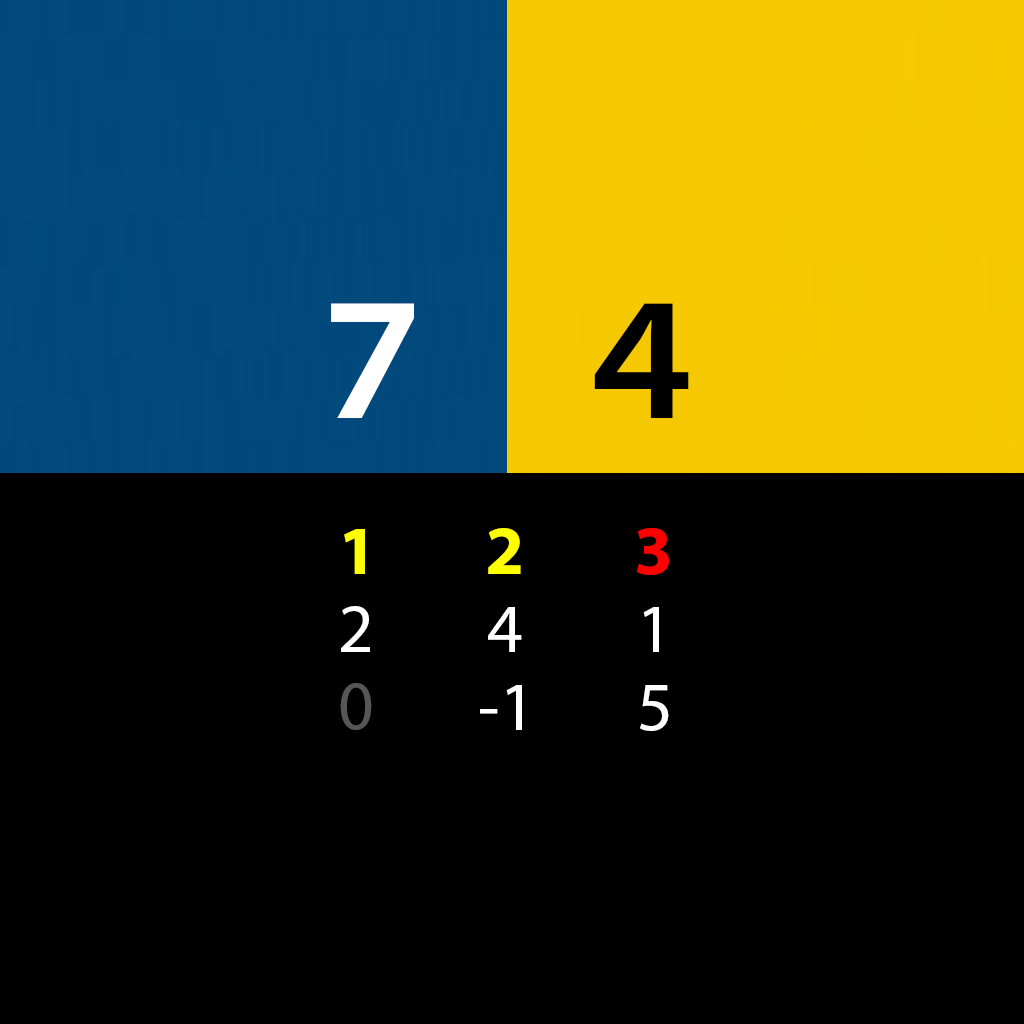
<style>
.page{position:relative;width:1024px;height:1024px;background:#000000}
.page>*{position:absolute;margin:0}
.t1{font:176px "MyriadConceptRoman-SemiboldSemiExtended";color:#ffffff}
.t2{font:176px "MyriadConceptRoman-SemiboldSemiExtended";color:#000000}
.t3{font:70px "MyriadPro-Bold";color:#ffff00}
.t4{font:70px "MyriadPro-Bold";color:#ff0000}
.t5{font:70px "MyriadPro-Regular";color:#ffffff}
.t6{font:70px "MyriadPro-Regular";color:#565656}
</style>
<div class="page">
<p class="t1" style="left:331px;top:303px;width:83px;height:115px">7</p>
<p class="t2" style="left:594px;top:303px;width:95px;height:115px">4</p>
<p class="t3" style="left:344px;top:529px;width:21px;height:45px">1</p>
<p class="t3" style="left:488px;top:528px;width:33px;height:46px">2</p>
<p class="t4" style="left:637px;top:528px;width:32px;height:47px">3</p>
<p class="t5" style="left:341px;top:606px;width:29px;height:46px">2</p>
<p class="t5" style="left:488px;top:607px;width:34px;height:45px">4</p>
<p class="t5" style="left:643px;top:607px;width:16px;height:45px">1</p>
<p class="t6" style="left:340px;top:683px;width:32px;height:47px">0</p>
<p class="t5" style="left:480px;top:685px;width:42px;height:45px">-1</p>
<p class="t5" style="left:640px;top:685px;width:29px;height:46px">5</p>
</div>
